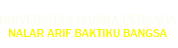
<style>
.page{position:relative;width:178px;height:48px;background:#ffffff}
.page>*{position:absolute;margin:0}
.t1{font:13px "FranklinGothic-Medium";color:#fcfcef}
.t2{font:12px "FranklinGothic-Medium";color:#faf701}
</style>
<div class="page">
<p class="t1" style="left:0px;top:15px;width:177px;height:9px">UNIVERSITAS DARMA PERSADA</p>
<p class="t2" style="left:9px;top:29px;width:158px;height:8px">NALAR ARIF BAKTIKU BANGSA</p>
</div>
